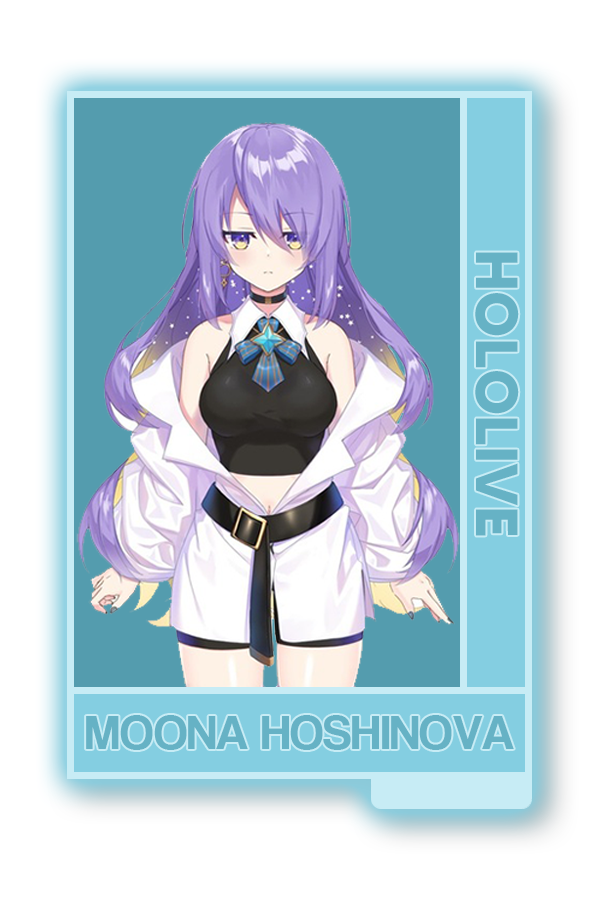
<style>
.page{position:relative;width:600px;height:900px;background:#ffffff}
.page>*{position:absolute;margin:0}
.t1{font:59.2px "MADETOMMY-Bold";color:#66b2c5}
.t2{font:49.9px "CoolveticaRg-Regular";color:#66b2c5}
</style>
<div class="page">
<p class="t1" style="left:475px;top:252px;width:44px;height:284px;rotate:90deg">HOLOLIVE</p>
<p class="t2" style="left:86px;top:715px;width:428px;height:35px">MOONA HOSHINOVA</p>
</div>
